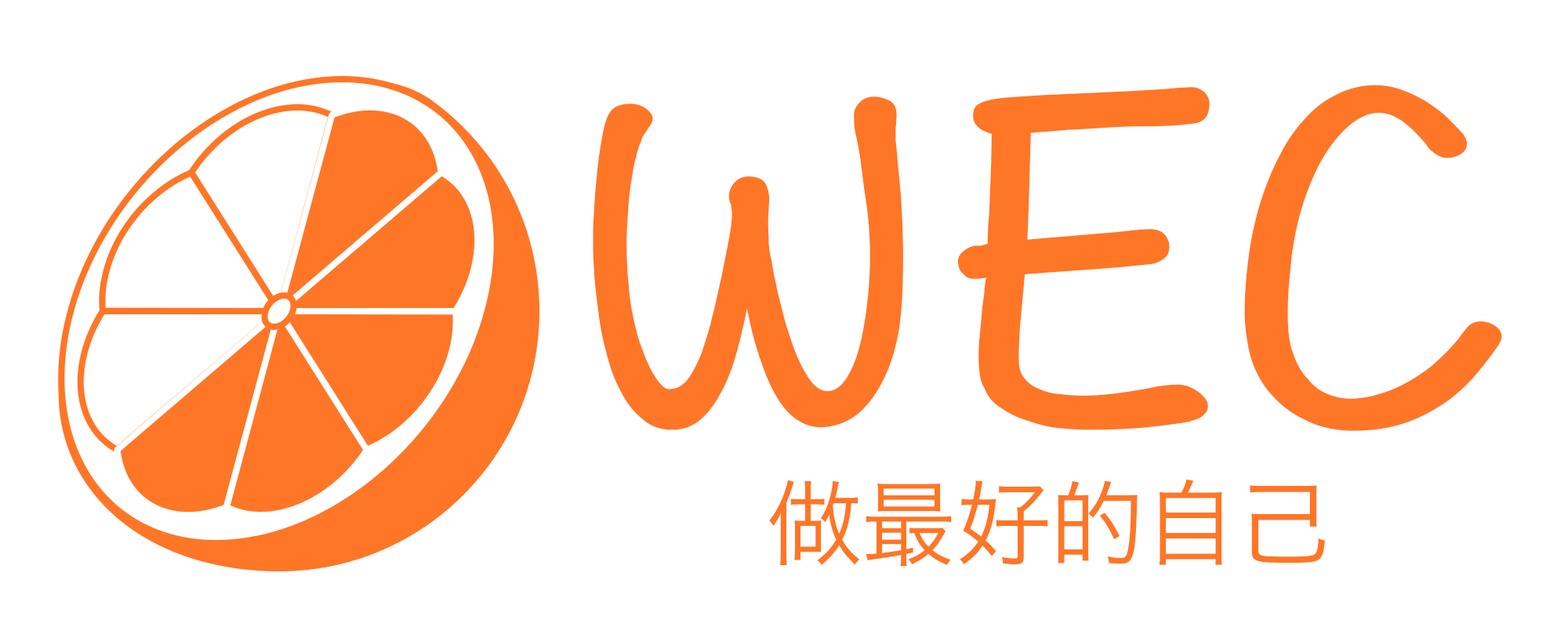
<style>
.page{position:relative;width:1568px;height:627px;background:#ffffff}
.page>*{position:absolute;margin:0}
.t1{font:501.8px "HannotateTC-W5";color:#ff7626}
.t2{font:94.1px "HiraginoSansGB-W3";color:#ff7626}
</style>
<div class="page">
<p class="t1" style="left:593px;top:85px;width:909px;height:346px">WEC</p>
<p class="t2" style="left:769px;top:479px;width:556px;height:88px">做最好的自己</p>
</div>
